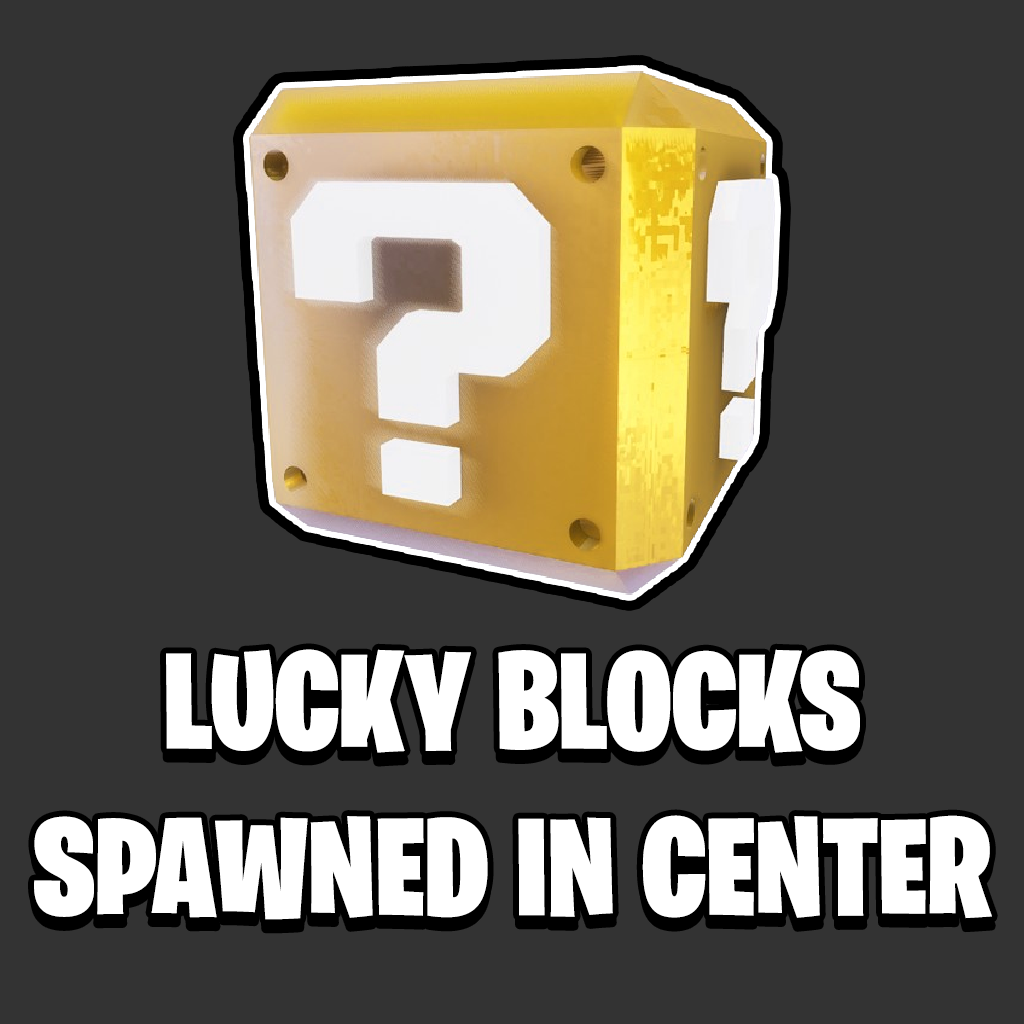
<style>
.page{position:relative;width:1024px;height:1024px;background:#333333}
.page>*{position:absolute;margin:0}
.t1{font:138.4px "BurbankBigCondensed-Black";color:#ffffff}
</style>
<div class="page">
<p class="t1" style="left:34px;top:649px;width:958px;height:271px;text-align:center">LUCKY BLOCKS <br>SPAWNED IN CENTER</p>
</div>
